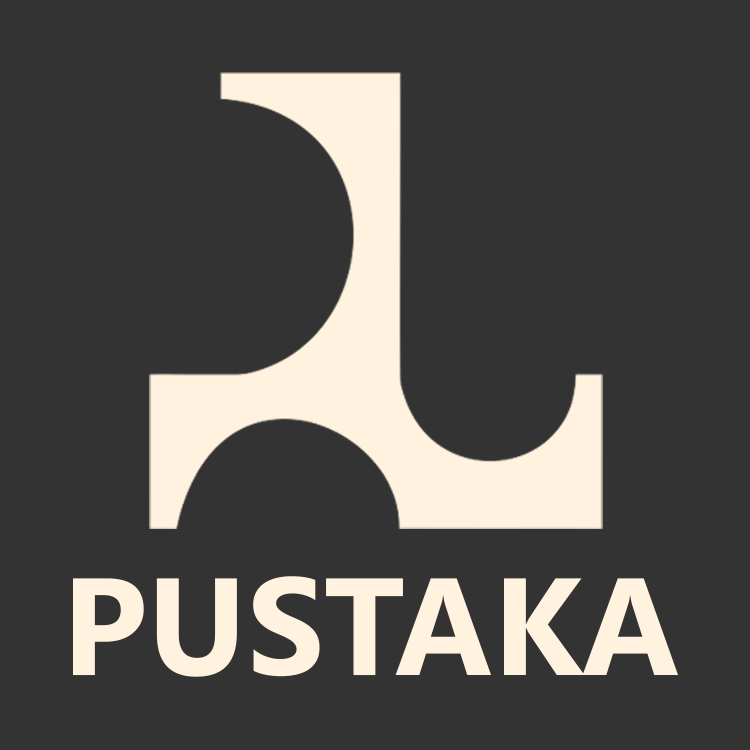
<style>
.page{position:relative;width:750px;height:750px;background:#333333}
.page>*{position:absolute;margin:0}
.t1{font:138.3px "SegoeUI-Bold";color:#fff3e0}
</style>
<div class="page">
<p class="t1" style="left:73px;top:576px;width:606px;height:101px">PUSTAKA</p>
</div>
